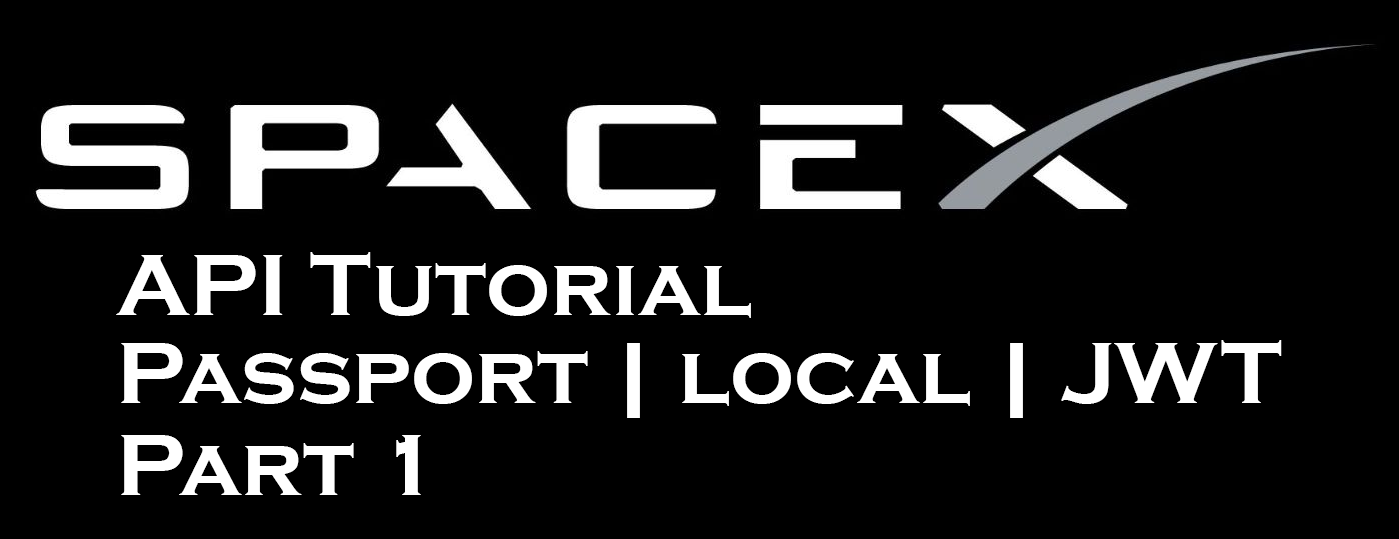
<style>
.page{position:relative;width:1399px;height:539px;background:#000000}
.page>*{position:absolute;margin:0}
.t1{font:90px "CopperplateGothic-Bold";color:#ffffff}
</style>
<div class="page">
<p class="t1" style="left:116px;top:252px;width:635px;height:66px">API Tutorial</p>
<p class="t1" style="left:121px;top:340px;width:1161px;height:78px">Passport | local | JWT</p>
<p class="t1" style="left:121px;top:435px;width:300px;height:60px">Part 1</p>
</div>
